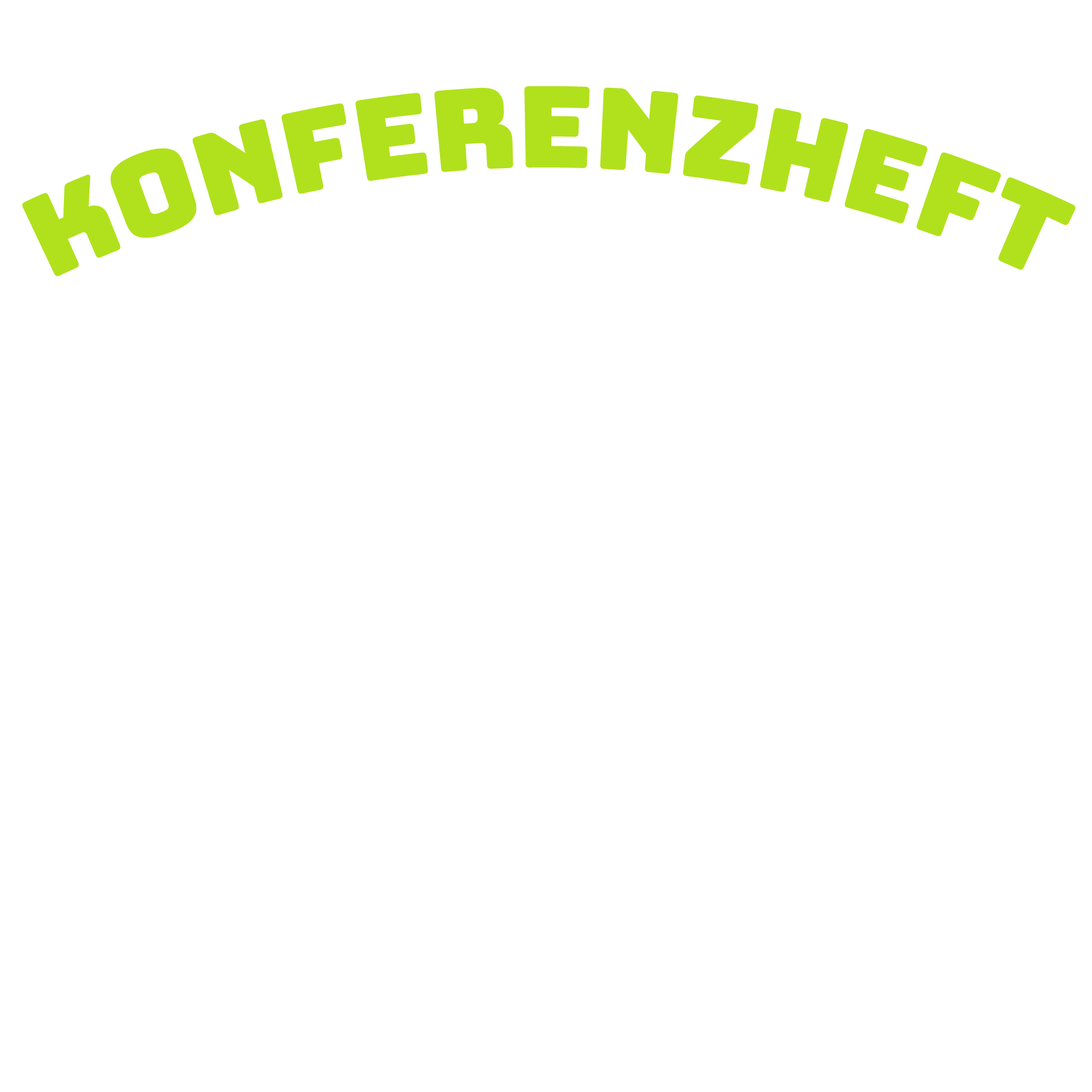
<style>
.page{position:relative;width:1092px;height:1092px;background:#ffffff}
.page>*{position:absolute;margin:0}
.t1{font:112.8px "Bungee-Regular";color:#b1e11c;font-variant:small-caps;scale:0.62 1}
</style>
<div class="page">
<p class="t1" style="left:22px;top:86px;width:1054px;height:190px">KONFERENZHEFT</p>
</div>
